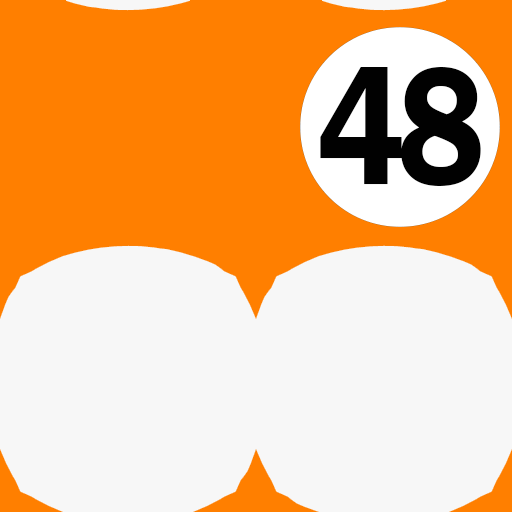
<style>
.page{position:relative;width:512px;height:512px;background:#f7f7f7}
.page>*{position:absolute;margin:0}
.t1{font:172.5px "FranklinGothic-Demi";letter-spacing:-0.05em;color:#010101;scale:0.87 1}
</style>
<div class="page">
<p class="t1" style="left:320px;top:67px;width:161px;height:119px">48</p>
</div>
